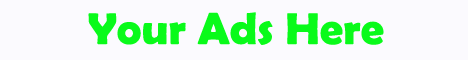
<style>
.page{position:relative;width:468px;height:60px;background:#fbfafe}
.page>*{position:absolute;margin:0}
.t1{font:44.8px "BerlinSansFBDemi-Bold";color:#09fa1a;scale:1.03 1}
</style>
<div class="page">
<p class="t1" style="left:88px;top:12px;width:296px;height:33px">Your Ads Here</p>
</div>
